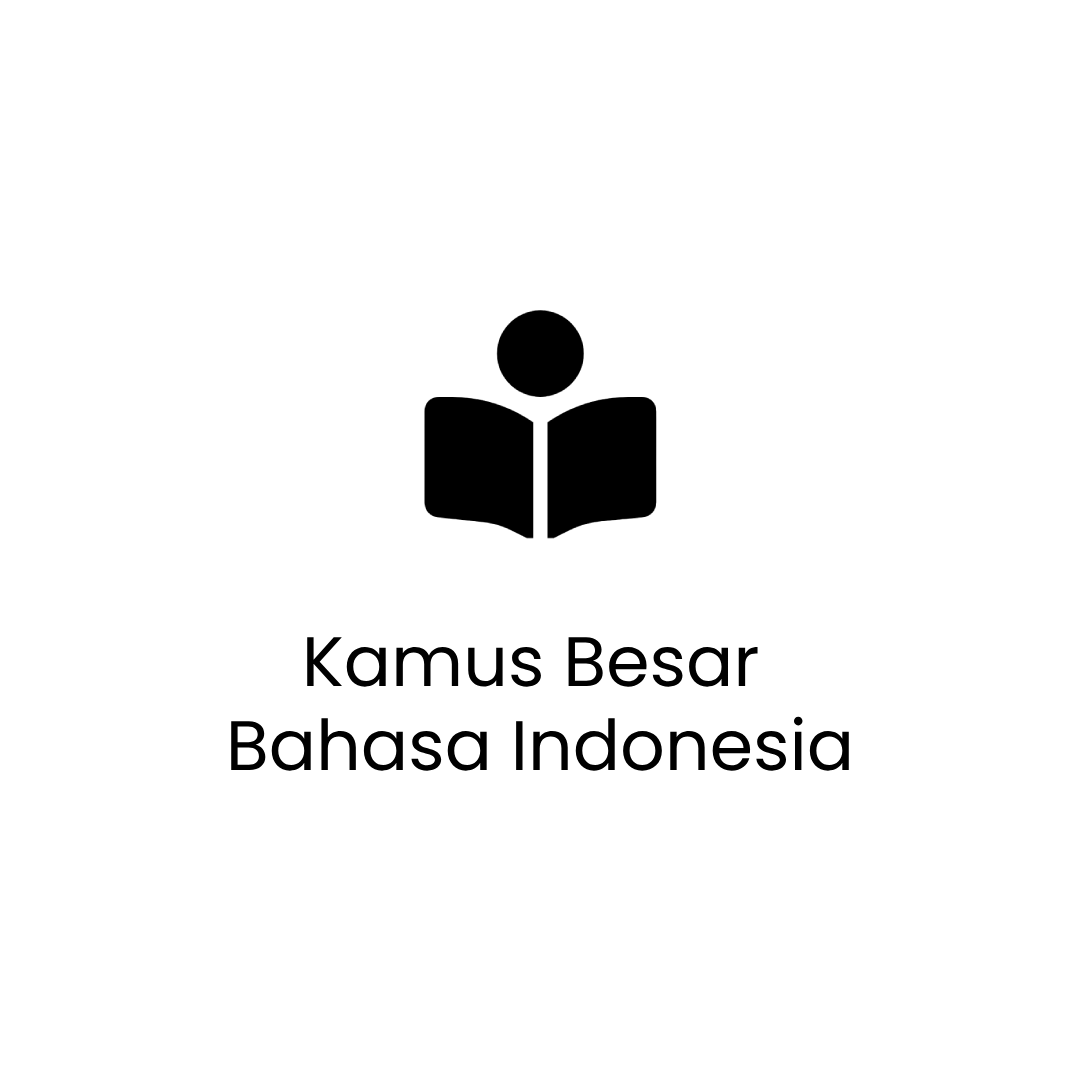
<style>
.page{position:relative;width:1080px;height:1080px;background:#ffffff}
.page>*{position:absolute;margin:0}
.t1{font:70px "Poppins-Regular";color:#000000}
</style>
<div class="page">
<p class="t1" style="left:231px;top:637px;width:618px;height:134px;text-align:center">Kamus Besar <br>Bahasa Indonesia</p>
</div>
